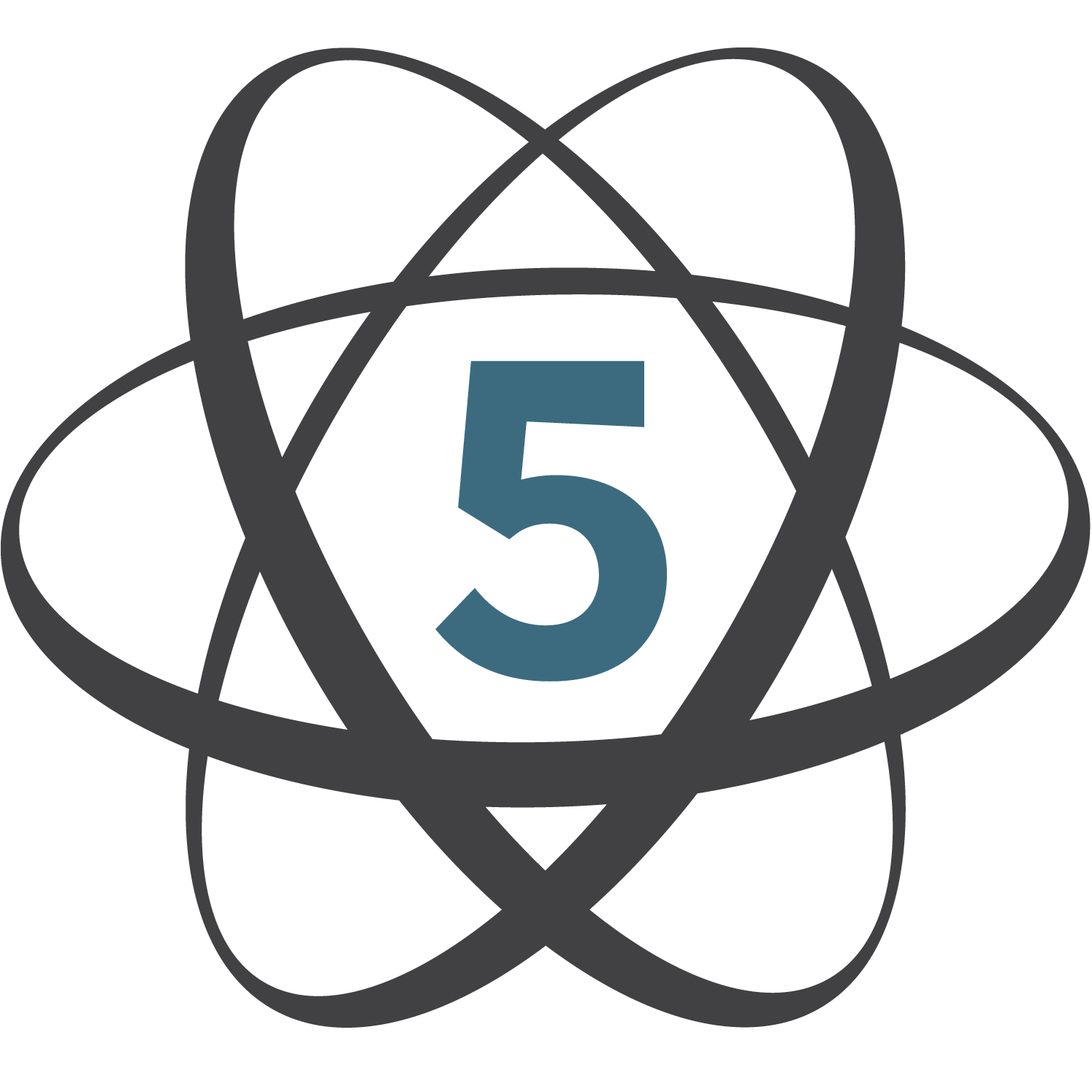
<style>
.page{position:relative;width:1092px;height:1092px;background:#ffffff}
.page>*{position:absolute;margin:0}
.t1{font:553.9px "Halcyon-SemiBold";color:#3c6b7f}
</style>
<div class="page">
<p class="t1" style="left:435px;top:361px;width:232px;height:320px">5</p>
</div>
